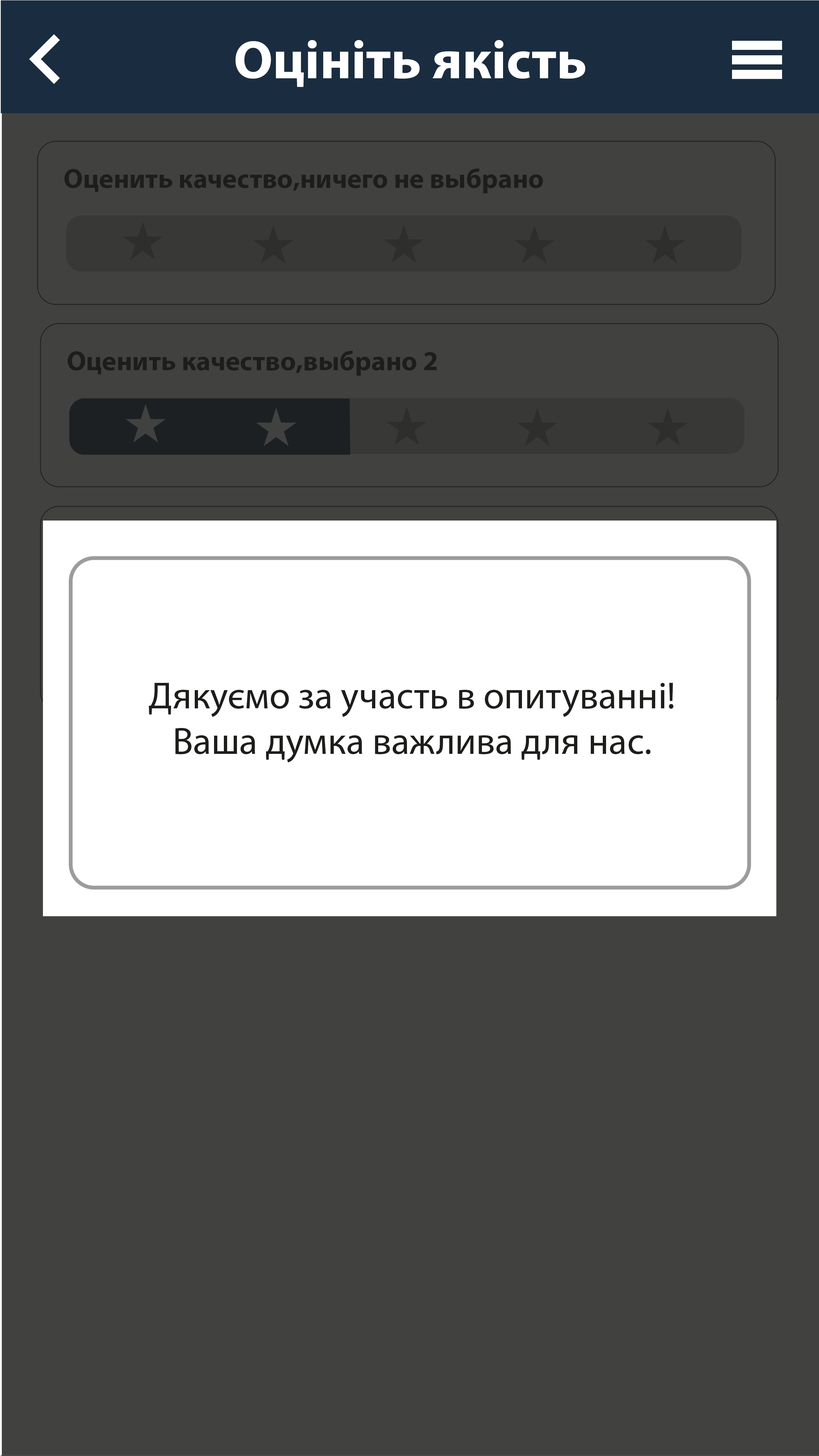
<style>
.page{position:relative;width:819px;height:1456px;background:#414240}
.page>*{position:absolute;margin:0}
.t1{font:54.6px "MyriadPro-Bold";color:#ffffff}
.t2{font:27.3px "MyriadPro-Bold";color:#1d1d1b}
.t3{font:37.9px "MyriadPro-Regular";color:#1d1d1b}
</style>
<div class="page">
<p class="t1" style="left:236px;top:40px;width:349px;height:47px">Оцініть якість</p>
<p class="t2" style="left:64px;top:168px;width:479px;height:25px">Оценить качество,ничего не выбрано</p>
<p class="t2" style="left:68px;top:351px;width:369px;height:25px">Оценить качество,выбрано 2</p>
<p class="t3" style="left:149px;top:683px;width:524px;height:80px;text-align:center">Дякуємо за участь в опитуванні!<br>Ваша думка важлива для нас.</p>
</div>
